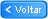
<style>
.page{position:relative;width:48px;height:19px}
.page>*{position:absolute;margin:0}
.t1{font:10px "ArialMT";letter-spacing:-0.01em;color:#ffffff}
</style>
<div class="page">
<p class="t1" style="left:15px;top:6px;width:26px;height:7px">Voltar</p>
</div>
